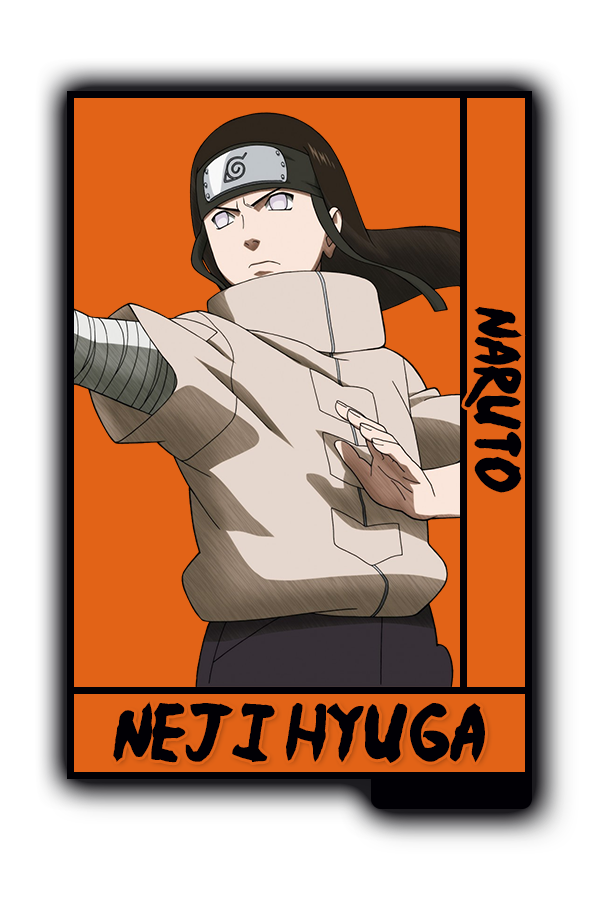
<style>
.page{position:relative;width:600px;height:900px;background:#e26317}
.page>*{position:absolute;margin:0}
.t1{font:52px "Ninja-Naruto";color:#010005}
.t2{font:65.2px "Ninja-Naruto";color:#010005}
</style>
<div class="page">
<p class="t1" style="left:464px;top:307px;width:59px;height:186px;rotate:90deg">Naruto</p>
<p class="t2" style="left:113px;top:701px;width:372px;height:62px">Neji Hyuga</p>
</div>
